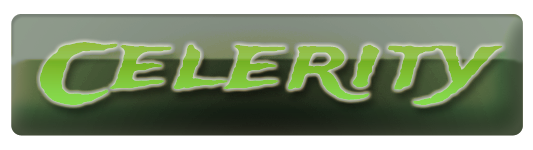
<style>
.page{position:relative;width:533px;height:150px;background:#ffffff}
.page>*{position:absolute;margin:0}
.t1{font:80px "TradeWinds";letter-spacing:0.05em;color:#85c345;scale:1.25 1}
.t2{font:80px "TradeWinds";letter-spacing:0.05em;color:#82bf3d;scale:1.25 1}
</style>
<div class="page">
<p class="t1" style="left:40px;top:42px;width:78px;height:63px">C</p>
<p class="t2" style="left:109px;top:44px;width:394px;height:61px">elerity</p>
</div>
